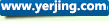
<style>
.page{position:relative;width:109px;height:21px}
.page>*{position:absolute;margin:0}
.t1{font:12px "MicrosoftYaHei-Bold";color:#ffffff}
</style>
<div class="page">
<p class="t1" style="left:1px;top:0px;width:105px;height:14px">www.yerjing.com</p>
</div>
